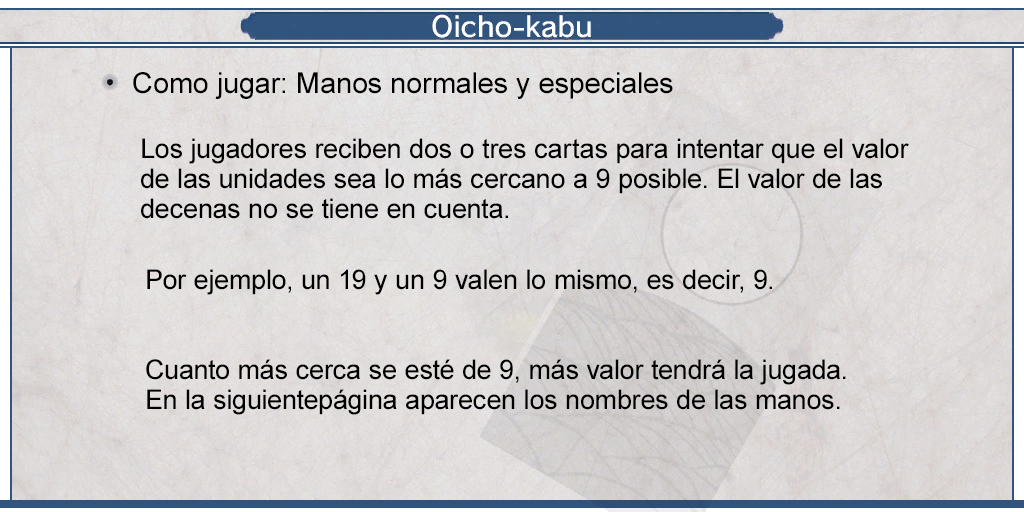
<style>
.page{position:relative;width:1024px;height:512px}
.page>*{position:absolute;margin:0}
.t1{font:29px "ArialMT";color:#000000}
.t2{font:27px/30px "ArialMT";color:#000000}
</style>
<div class="page">
<p class="t1" style="left:133px;top:72px;width:540px;height:27px">Como jugar: Manos normales y especiales</p>
<p class="t2" style="left:141px;top:138px;width:768px;height:81px">Los jugadores reciben dos o tres cartas para intentar que el valor <br>de las unidades sea lo más cercano a 9 posible. El valor de las <br>decenas no se tiene en cuenta.</p>
<p class="t2" style="left:146px;top:269px;width:700px;height:146px">Por ejemplo, un 19 y un 9 valen lo mismo, es decir, 9.<br><br><br>Cuanto más cerca se esté de 9, más valor tendrá la jugada. <br>En la siguientepágina aparecen los nombres de las manos.</p>
</div>
